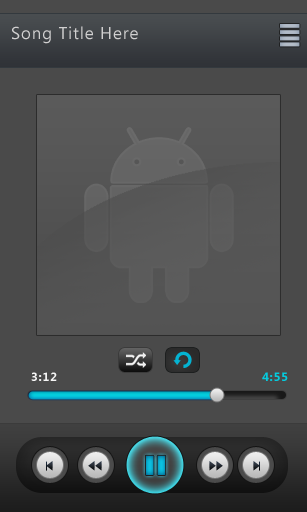
<style>
.page{position:relative;width:307px;height:512px;background:#4a4a4a}
.page>*{position:absolute;margin:0}
.t1{font:17px "Ebrima";letter-spacing:0.05em;color:#d1d0d0}
.t2{font:12px "Ebrima-Bold";letter-spacing:0.05em;color:#f5f5f5}
.t3{font:12px "Ebrima-Bold";letter-spacing:0.05em;color:#04cbde}
</style>
<div class="page">
<p class="t1" style="left:12px;top:26px;width:126px;height:18px">Song Title Here</p>
<p class="t2" style="left:31px;top:372px;width:26px;height:9px">3:12</p>
<p class="t3" style="left:262px;top:372px;width:26px;height:9px">4:55</p>
</div>
